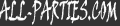
<style>
.page{position:relative;width:120px;height:26px;background:#333333}
.page>*{position:absolute;margin:0}
.t1{font:27px "VinerHandITC";color:#ffffff;scale:0.45 1}
</style>
<div class="page">
<p class="t1" style="left:0px;top:0px;width:117px;height:25px">ALL-PARTIES.COM</p>
</div>
